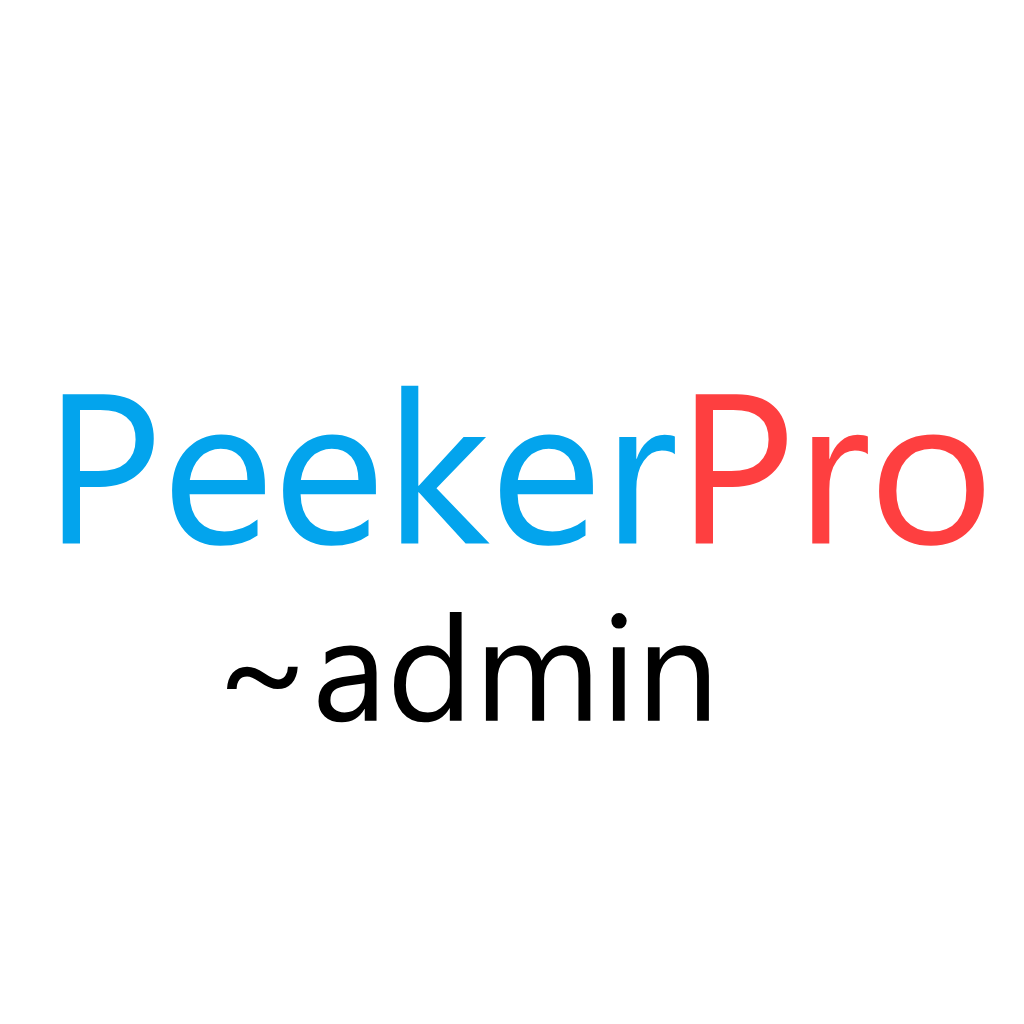
<style>
.page{position:relative;width:1024px;height:1024px;background:#ffffff}
.page>*{position:absolute;margin:0}
.t1{font:213px "MonlamUniSansSerif";color:#03a4ed}
.t2{font:213px "MonlamUniSansSerif";color:#fe3f40}
.t3{font:147px "MonlamUniSansSerif";color:#000000}
</style>
<div class="page">
<p class="t1" style="left:62px;top:385px;width:922px;height:161px">Peeker<span class="t2">Pro</span></p>
<p class="t3" style="left:227px;top:611px;width:482px;height:112px">~admin</p>
</div>
